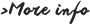
<style>
.page{position:relative;width:90px;height:24px;background:#ffffff}
.page>*{position:absolute;margin:0}
.t1{font:17px "anothershabby";letter-spacing:0.05em;color:#252525}
</style>
<div class="page">
<p class="t1" style="left:0px;top:0px;width:90px;height:25px">&gt;More info</p>
</div>
